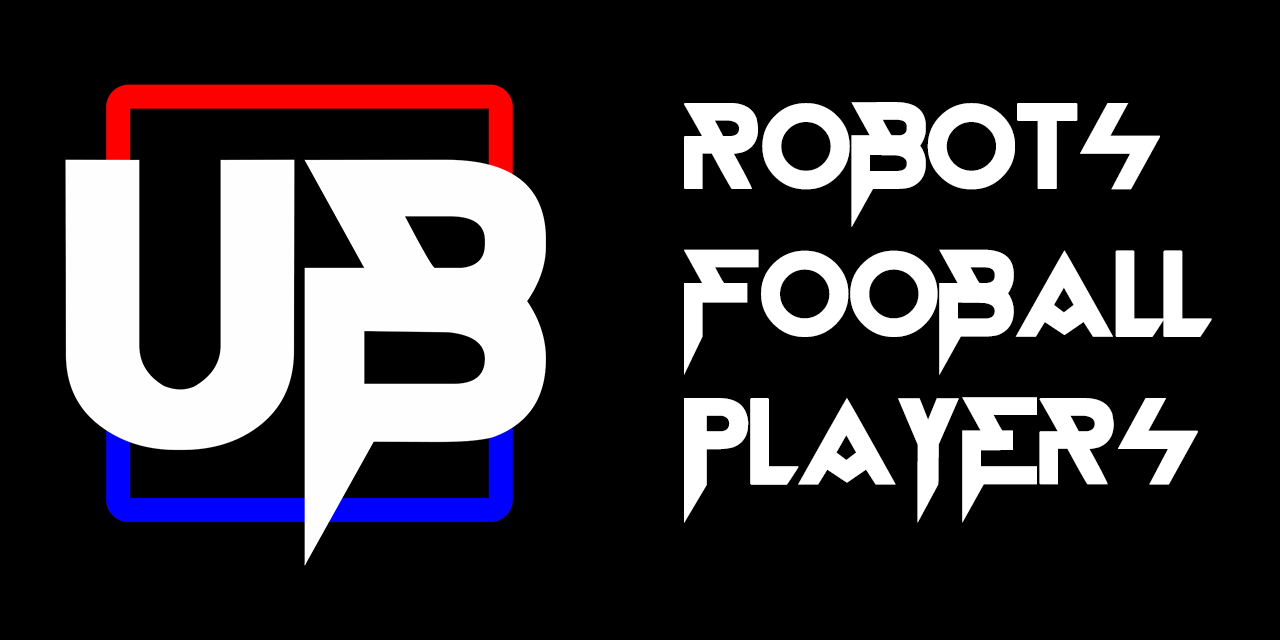
<style>
.page{position:relative;width:1280px;height:640px;background:#000000}
.page>*{position:absolute;margin:0}
.t1{font:123px "BlackStarFJNTBYLYAJKA";color:#ffffff}
</style>
<div class="page">
<p class="t1" style="left:684px;top:102px;width:528px;height:421px">Robots Fooball Players</p>
</div>
